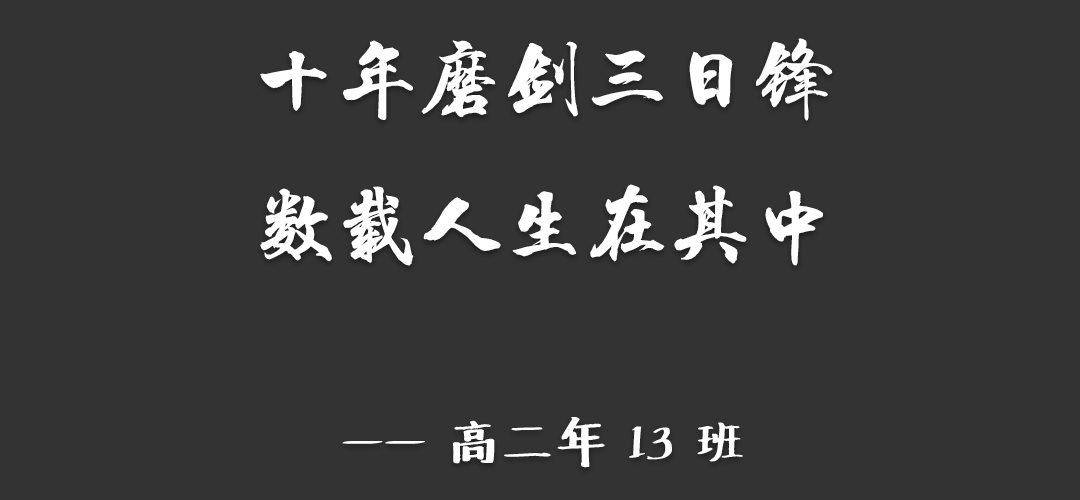
<style>
.page{position:relative;width:1080px;height:500px;background:#333333}
.page>*{position:absolute;margin:0}
.t1{font:83.3px "HYChengXingJ";color:#ffffff}
.t2{font:50px "Undefined";color:#ffffff}
</style>
<div class="page">
<p class="t1" style="left:260px;top:38px;width:573px;height:430px;text-align:center">十年磨剑三日锋<br>数载人生在其中<br><span class="t2"><br>—— 高二年 13 班</span></p>
</div>
